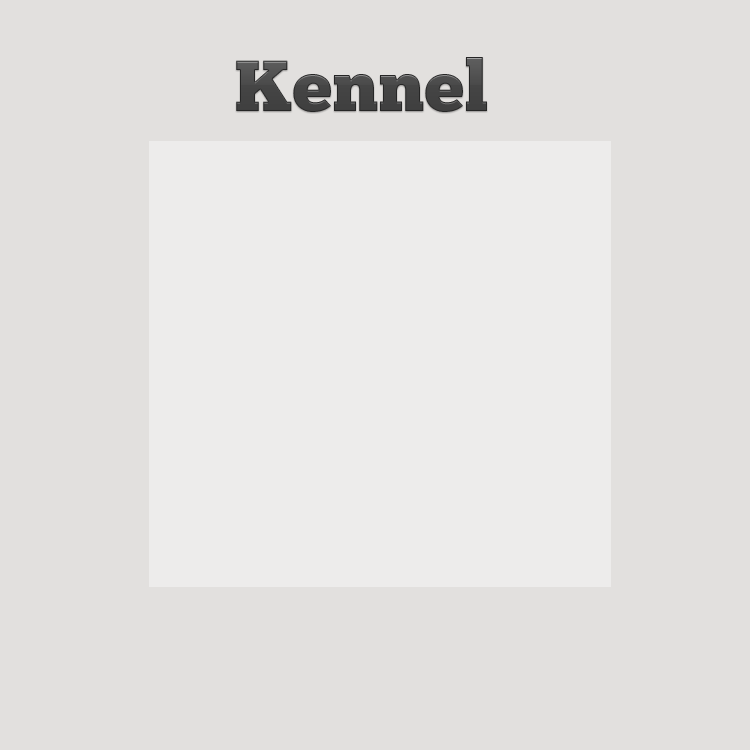
<style>
.page{position:relative;width:750px;height:750px;background:#e2e0de}
.page>*{position:absolute;margin:0}
.t1{font:72px "ChunkFive";color:#434343}
</style>
<div class="page">
<p class="t1" style="left:236px;top:57px;width:251px;height:55px">Kennel</p>
</div>
